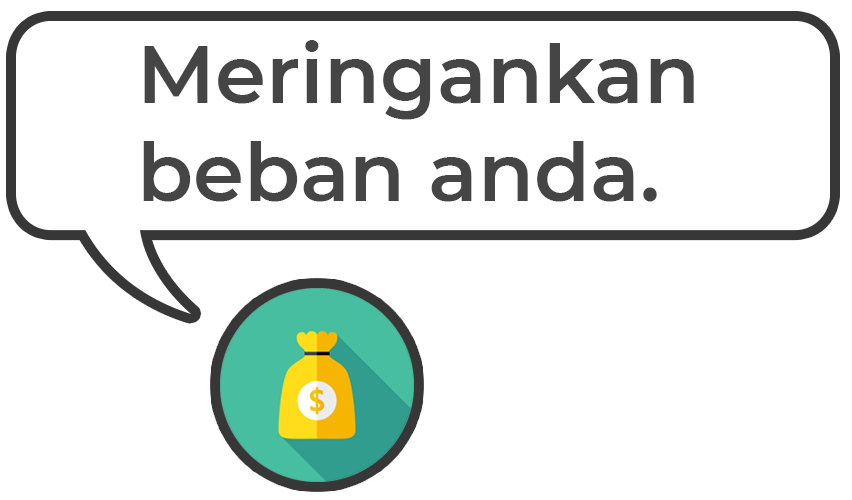
<style>
.page{position:relative;width:852px;height:500px;background:#ffffff}
.page>*{position:absolute;margin:0}
.t1{font:82px "Montserrat-SemiBold";color:#464545}
</style>
<div class="page">
<p class="t1" style="left:143px;top:40px;width:551px;height:162px">Meringankan<br>beban anda.</p>
</div>
